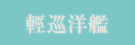
<style>
.page{position:relative;width:135px;height:45px;background:#7dc6c6}
.page>*{position:absolute;margin:0}
.t1{font:21px "RyuminPro-Medium";color:#f4e6df}
</style>
<div class="page">
<p class="t1" style="left:25px;top:14px;width:84px;height:20px">輕巡洋艦</p>
</div>
